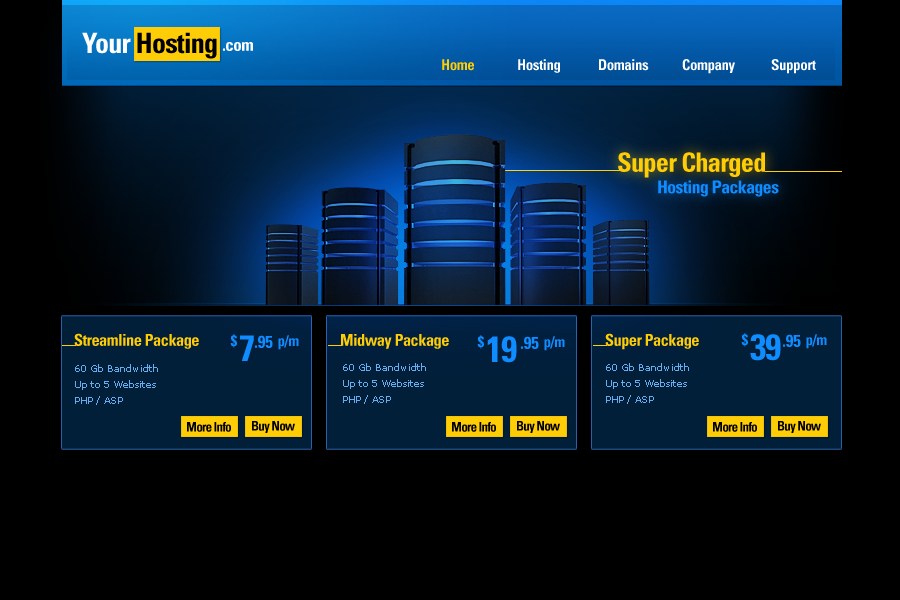
<style>
.page{position:relative;width:900px;height:600px;background:#000000}
.page>*{position:absolute;margin:0}
.t1{font:28.2px "Univers-CondensedBold";letter-spacing:-0.03em;color:#000000}
.t2{font:28.2px "Univers-CondensedBold";letter-spacing:-0.03em;color:#ffffff}
.t3{font:17.1px "Univers-CondensedBold";letter-spacing:-0.03em;color:#ffffff}
.t4{font:15px "Univers-CondensedBold";letter-spacing:-0.03em;color:#ffcd06}
.t5{font:15px "Univers-CondensedBold";letter-spacing:-0.03em;color:#ffffff}
.t6{font:26.5px "Univers-CondensedBold";letter-spacing:-0.03em;color:#ffcd06}
.t7{font:17.7px "Univers-CondensedBold";letter-spacing:-0.03em;color:#0f8cff}
.t8{font:16.3px "Univers-CondensedBold";letter-spacing:-0.03em;color:#ffcd06}
.t9{font:14.9px "Univers-CondensedBold";letter-spacing:-0.03em;color:#0f8cff}
.t10{font:36.5px "Univers-CondensedBold";letter-spacing:-0.03em;color:#0f8cff}
.t11{font:17px "Univers-CondensedBold";color:#0f8cff}
.t12{font:10px/16px "Verdana";letter-spacing:-0.03em;color:#67aef0}
.t13{font:13.1px "Univers-CondensedBold";letter-spacing:-0.06em;color:#000000}
</style>
<div class="page">
<p class="t1" style="left:82px;top:32px;width:135px;height:27px"><span class="t2">Your </span>Hosting</p>
<p class="t3" style="left:223px;top:42px;width:30px;height:9px">.com</p>
<p class="t4" style="left:442px;top:59px;width:32px;height:12px">Home</p>
<p class="t5" style="left:518px;top:59px;width:42px;height:14px">Hosting</p>
<p class="t5" style="left:599px;top:59px;width:50px;height:12px">Domains</p>
<p class="t5" style="left:682px;top:59px;width:53px;height:15px">Company</p>
<p class="t5" style="left:771px;top:59px;width:45px;height:15px">Support</p>
<p class="t6" style="left:618px;top:152px;width:147px;height:26px">Super Charged</p>
<p class="t7" style="left:658px;top:180px;width:121px;height:17px">Hosting Packages</p>
<p class="t8" style="left:74px;top:333px;width:125px;height:16px">Streamline Package</p>
<p class="t9" style="left:230px;top:334px;width:7px;height:14px">$</p>
<p class="t10" style="left:240px;top:335px;width:14px;height:26px">7</p>
<p class="t11" style="left:255px;top:335px;width:18px;height:13px">.95</p>
<p class="t9" style="left:278px;top:335px;width:21px;height:15px">p/m</p>
<p class="t8" style="left:341px;top:334px;width:108px;height:15px">Midway Package</p>
<p class="t9" style="left:477px;top:335px;width:7px;height:14px">$</p>
<p class="t10" style="left:487px;top:336px;width:30px;height:27px">19</p>
<p class="t11" style="left:521px;top:336px;width:18px;height:13px">.95</p>
<p class="t9" style="left:544px;top:336px;width:21px;height:15px">p/m</p>
<p class="t8" style="left:605px;top:333px;width:94px;height:17px">Super Package</p>
<p class="t9" style="left:741px;top:333px;width:7px;height:14px">$</p>
<p class="t10" style="left:750px;top:334px;width:31px;height:27px">39</p>
<p class="t11" style="left:783px;top:334px;width:18px;height:13px">.95</p>
<p class="t9" style="left:806px;top:334px;width:21px;height:15px">p/m</p>
<p class="t12" style="left:75px;top:364px;width:83px;height:41px">60 Gb Bandwidth<br>Up to 5 Websites<br>PHP / ASP</p>
<p class="t12" style="left:343px;top:363px;width:83px;height:41px">60 Gb Bandwidth<br>Up to 5 Websites<br>PHP / ASP</p>
<p class="t12" style="left:606px;top:363px;width:83px;height:41px">60 Gb Bandwidth<br>Up to 5 Websites<br>PHP / ASP</p>
<p class="t13" style="left:187px;top:422px;width:44px;height:10px">More Info</p>
<p class="t13" style="left:252px;top:421px;width:43px;height:12px">Buy Now</p>
<p class="t13" style="left:452px;top:422px;width:44px;height:10px">More Info</p>
<p class="t13" style="left:517px;top:421px;width:43px;height:12px">Buy Now</p>
<p class="t13" style="left:713px;top:422px;width:44px;height:10px">More Info</p>
<p class="t13" style="left:778px;top:421px;width:43px;height:12px">Buy Now</p>
</div>
